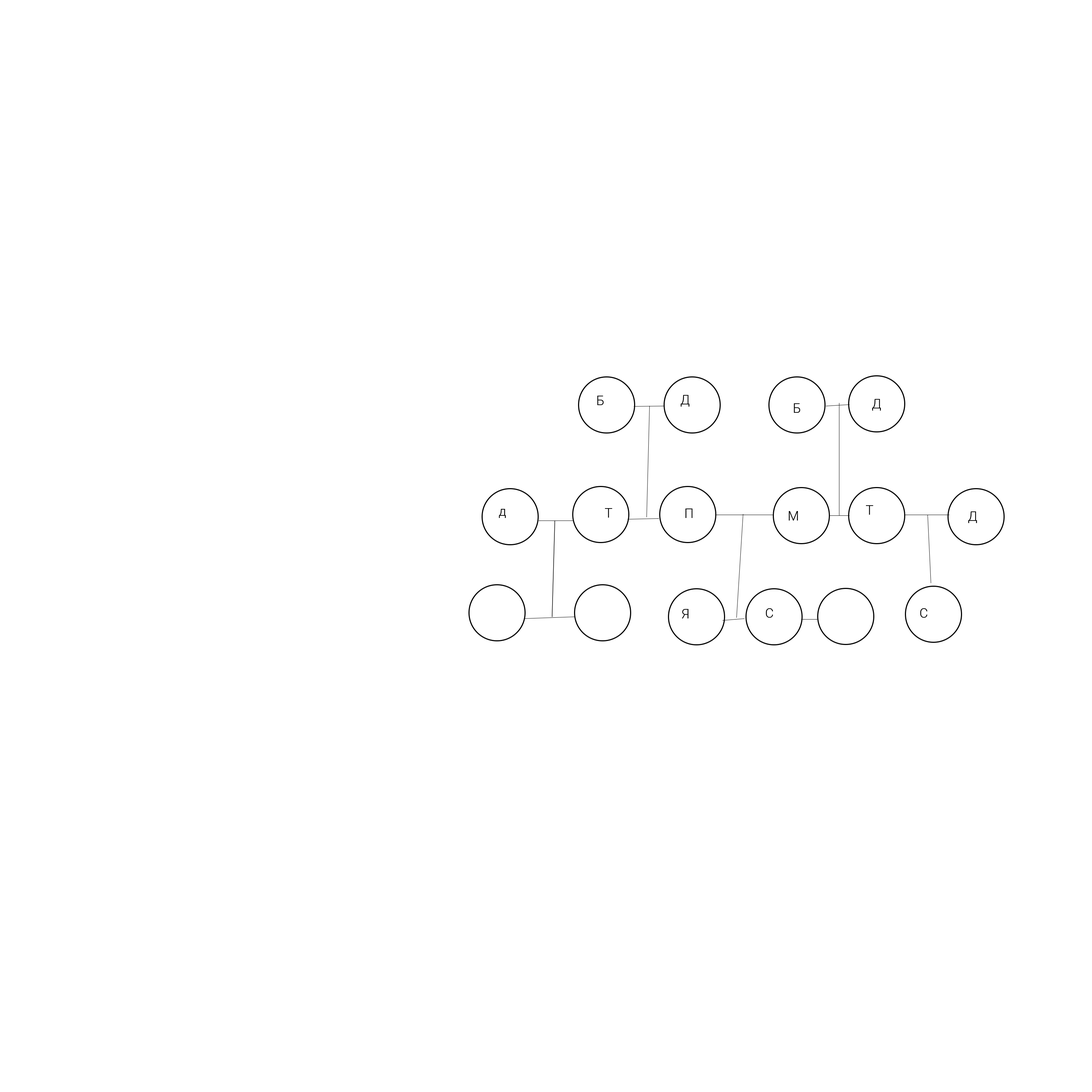
<style>
.page{position:relative;width:1092px;height:1092px;background:#ffffff}
.page>*{position:absolute;margin:0}
.t1{font:13.1px "Roboto-Light";color:#000000}
</style>
<div class="page">
<p class="t1" style="left:597px;top:396px;width:7px;height:9px">Б</p>
<p class="t1" style="left:681px;top:395px;width:8px;height:12px">Д</p>
<p class="t1" style="left:872px;top:399px;width:9px;height:12px">Д</p>
<p class="t1" style="left:794px;top:403px;width:6px;height:10px">Б</p>
<p class="t1" style="left:499px;top:509px;width:7px;height:9px">д</p>
<p class="t1" style="left:605px;top:508px;width:7px;height:10px">Т</p>
<p class="t1" style="left:685px;top:509px;width:8px;height:9px">П</p>
<p class="t1" style="left:866px;top:505px;width:7px;height:10px">Т</p>
<p class="t1" style="left:789px;top:511px;width:9px;height:10px">М</p>
<p class="t1" style="left:968px;top:511px;width:9px;height:12px">Д</p>
<p class="t1" style="left:682px;top:609px;width:7px;height:9px">Я</p>
<p class="t1" style="left:766px;top:608px;width:7px;height:10px">С</p>
<p class="t1" style="left:920px;top:608px;width:7px;height:10px">С</p>
</div>
